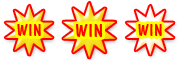
<style>
.page{position:relative;width:180px;height:60px;background:#ffffff}
.page>*{position:absolute;margin:0}
.t1{font:17px "DomCasualBT-Regular";letter-spacing:0.03em;color:#ff0000}
.t2{font:19px "DomCasualBT-Regular";letter-spacing:0.03em;color:#ff0000}
</style>
<div class="page">
<p class="t1" style="left:17px;top:24px;width:24px;height:12px">WIN</p>
<p class="t2" style="left:76px;top:24px;width:27px;height:13px">WIN</p>
<p class="t1" style="left:138px;top:24px;width:24px;height:12px">WIN</p>
</div>
